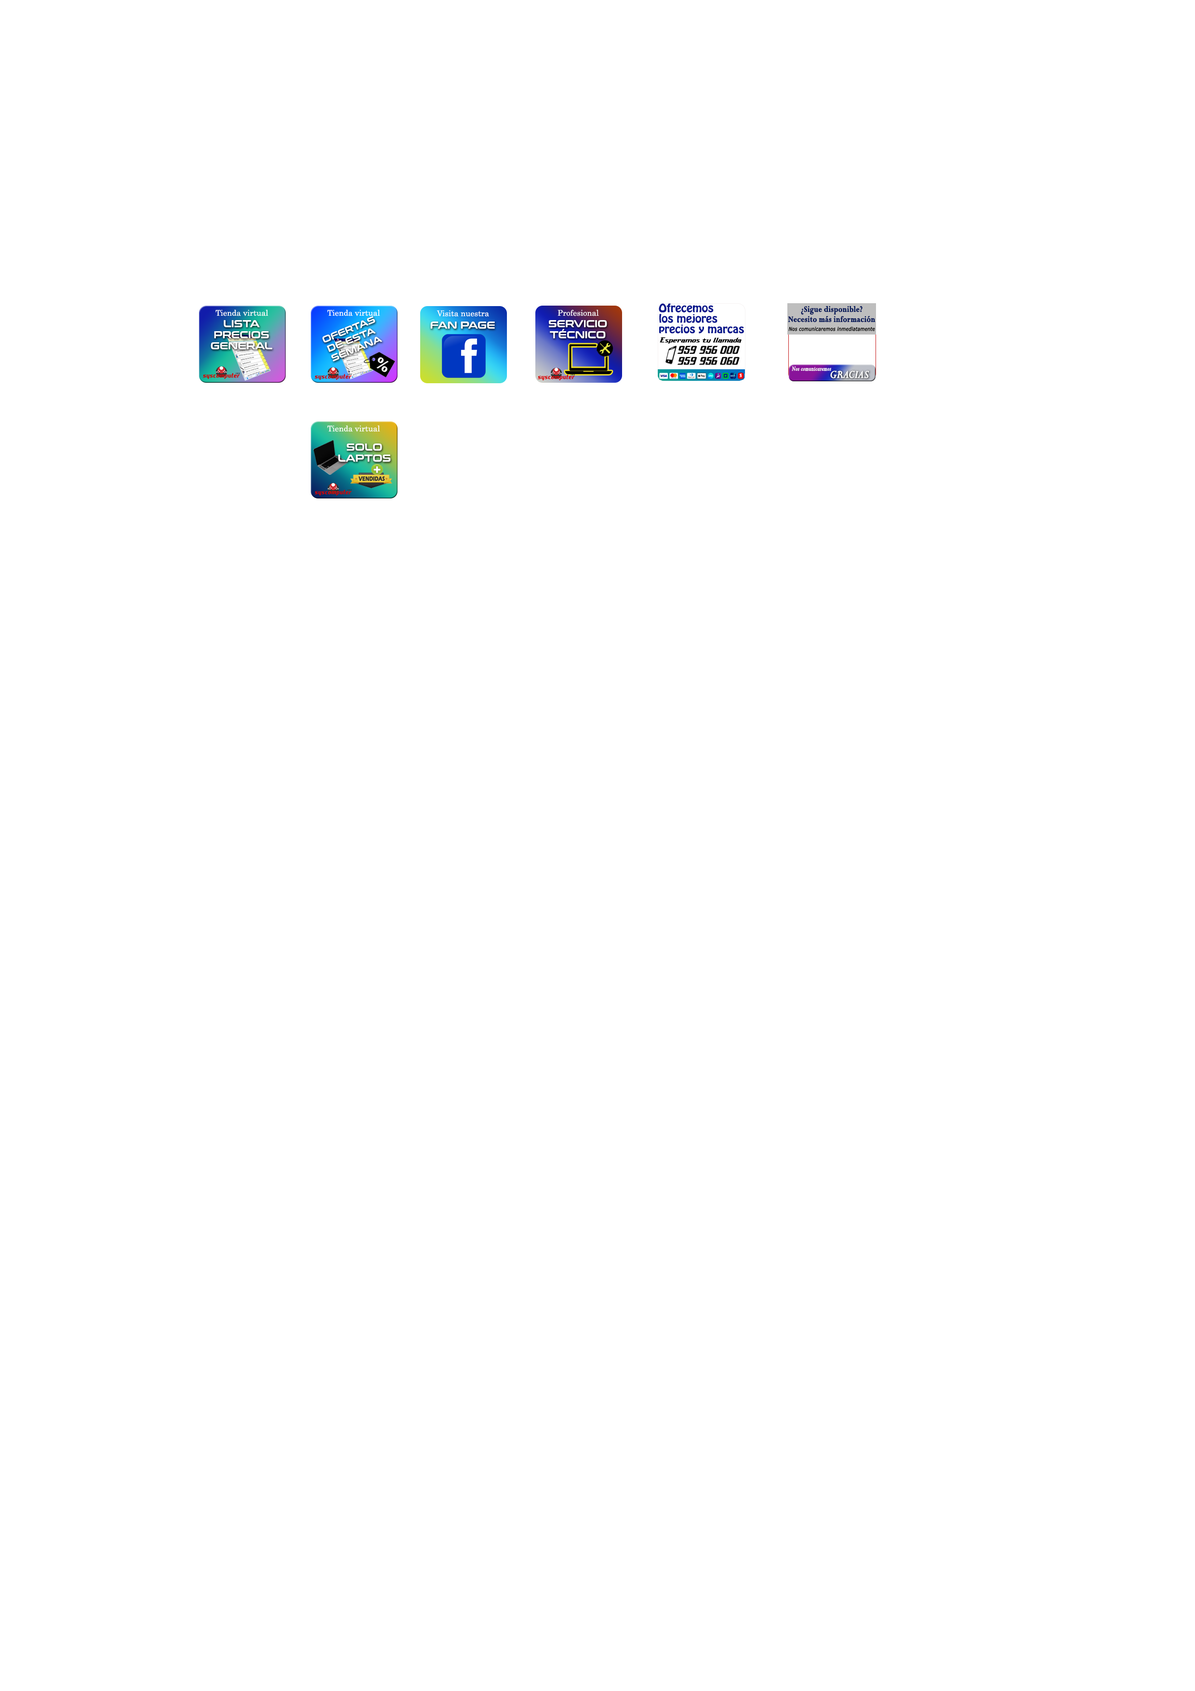
<style>
.page{position:relative;width:1195px;height:1691px;background:#ffffff}
.page>*{position:absolute;margin:0}
.t1{font:10.2px/10.5px "HoboStd";color:#06168c;scale:1.1 1}
.t2{font:8.8px/10px "Perpetua-Bold";color:#051958;font-weight:bold;scale:0.85 1}
.t3{font:5.2px/9px "Verdana-Italic";color:#000000;font-weight:bold;scale:0.85 1}
.t4{font:7.9px "Century";color:#ffffff}
.t5{font:9.2px/10.2px "ConthraxSb-Regular";color:#ffffff}
.t6{font:9.9px/11px "ConthraxSb-Regular";color:#ffffff}
.t7{font:9.9px "ConthraxSb-Regular";color:#ffffff}
.t8{font:7.1px "DashHorizon";color:#000000;scale:1.49 1}
.t9{font:10.5px/11px "DashHorizon";color:#000000;scale:1.17 1}
.t10{font:7.1px "Perpetua-Italic";color:#fffffe;font-weight:bold;scale:0.83 1}
.t11{font:11.9px "Perpetua-Italic";color:#ffffff;font-weight:bold}
</style>
<div class="page">
<p class="t1" style="left:659px;top:303px;width:85px;height:30px">Ofrecemos<br>los mejores<br>precios y marcas</p>
<p class="t2" style="left:788px;top:306px;width:88px;height:25px;text-align:center">¿Sigue disponible?<br>Necesito más información<br><span class="t3">Nos comunicaremos inmediatamente</span></p>
<p class="t4" style="left:215px;top:309px;width:53px;height:7px">Tienda virtual</p>
<p class="t5" style="left:322px;top:316px;width:60px;height:45px;text-align:center;rotate:-22deg">OFERTAS<br>DE ESTA <br>SEMANA</p>
<p class="t4" style="left:327px;top:309px;width:53px;height:7px">Tienda virtual</p>
<p class="t4" style="left:437px;top:310px;width:52px;height:7px">Visita nuestra</p>
<p class="t4" style="left:558px;top:309px;width:41px;height:7px">Profesional</p>
<p class="t6" style="left:211px;top:320px;width:61px;height:29px;text-align:center">LISTA<br>PRECIOS<br>GENERAL</p>
<p class="t7" style="left:430px;top:321px;width:65px;height:8px">FAN PAGE</p>
<p class="t6" style="left:549px;top:320px;width:58px;height:18px;text-align:center">SERVICIO<br>TÉCNICO</p>
<p class="t8" style="left:660px;top:337px;width:82px;height:7px">Esperamos tu llamada</p>
<p class="t9" style="left:677px;top:346px;width:63px;height:19px">959 956 000<br>959 956 060</p>
<p class="t10" style="left:792px;top:366px;width:39px;height:5px">Nos comunicaremos</p>
<p class="t11" style="left:830px;top:371px;width:39px;height:7px">GRACIAS</p>
<p class="t4" style="left:327px;top:425px;width:53px;height:7px">Tienda virtual</p>
<p class="t6" style="left:338px;top:443px;width:53px;height:19px;text-align:center">SOLO<br>LAPTOS</p>
</div>
